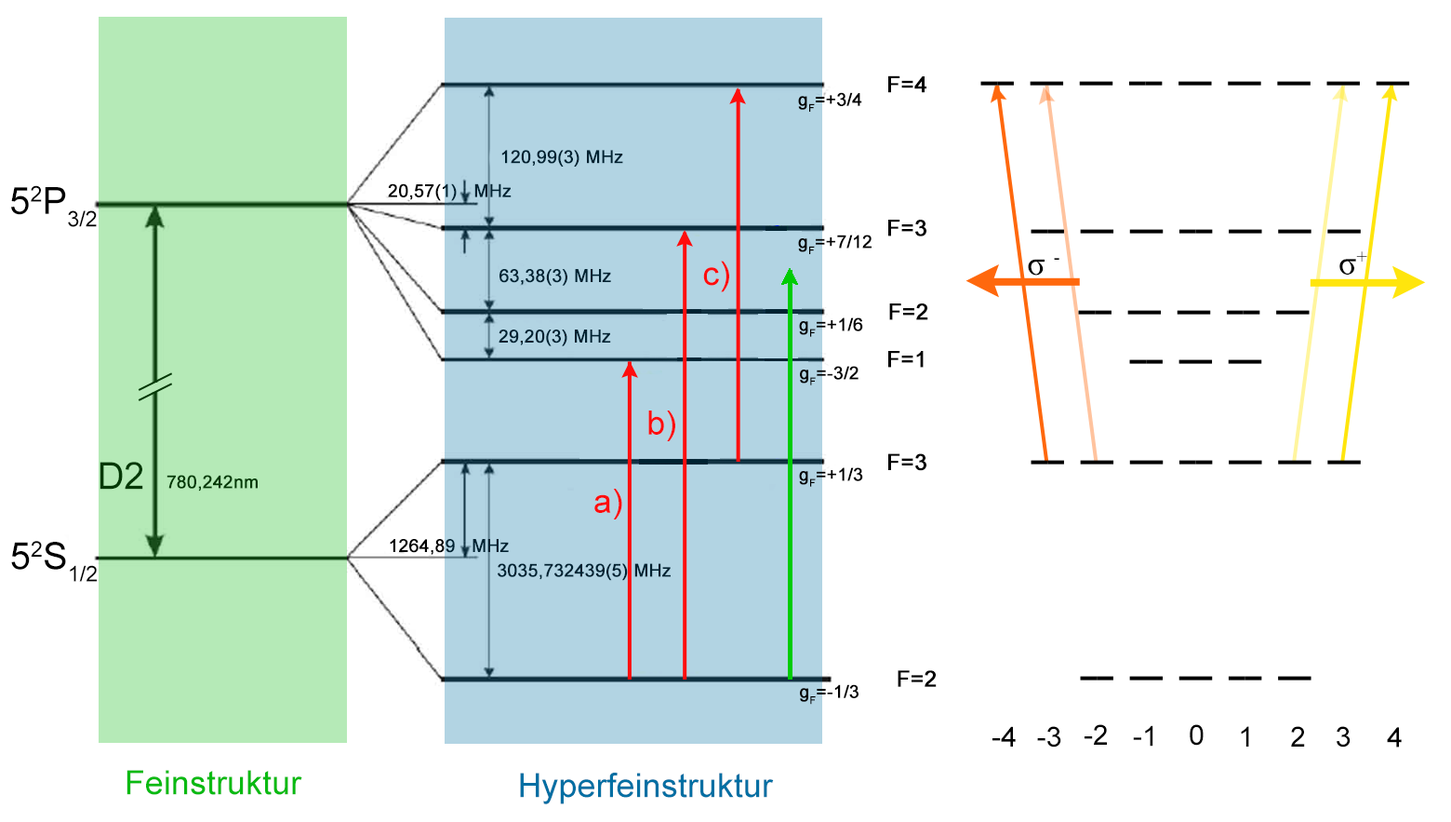
<style>
.page{position:relative;width:1451px;height:822px;background:#ffffff}
.page>*{position:absolute;margin:0}
.t1{font:22.3px "ArialMT";color:#000000;font-weight:bold}
.t2{font:17.7px "ArialMT";color:#000000;font-weight:bold}
.t3{font:17.7px "ArialMT";color:#002231;font-weight:bold}
.t4{font:37.2px "ArialMT";color:#000000}
.t5{font:17.7px "ArialMT";font-weight:bold}
.t6{font:33.5px "TimesNewRomanPSMT";color:#000000}
.t7{font:33.5px "ArialMT";color:#ff0d0d}
.t8{font:37.2px "ArialMT";color:#033805}
.t9{font:17.7px "ArialMT";color:#033805;font-weight:bold}
.t10{font:27.9px "ArialMT";color:#000000}
.t11{font:33.5px "ArialMT";color:#09ba12}
.t12{font:33.5px "ArialMT";color:#006fa3}
</style>
<div class="page">
<p class="t1" style="left:889px;top:75px;width:38px;height:18px">F=4</p>
<p class="t2" style="left:798px;top:92px;width:64px;height:20px">gF=+3/4</p>
<p class="t3" style="left:501px;top:150px;width:122px;height:17px">120,99(3) MHz</p>
<p class="t4" style="left:11px;top:185px;width:86px;height:42px">52P3/2</p>
<p class="t5" style="left:388px;top:183px;width:124px;height:18px">20,57(1)   MHz</p>
<p class="t1" style="left:889px;top:220px;width:38px;height:16px">F=3</p>
<p class="t2" style="left:798px;top:234px;width:74px;height:20px">gF=+7/12</p>
<p class="t6" style="left:1028px;top:258px;width:32px;height:17px">σ -</p>
<p class="t6" style="left:1340px;top:251px;width:28px;height:23px">σ+</p>
<p class="t3" style="left:500px;top:269px;width:111px;height:17px">63,38(3) MHz</p>
<p class="t7" style="left:703px;top:261px;width:26px;height:31px">c)</p>
<p class="t1" style="left:889px;top:303px;width:40px;height:17px">F=2</p>
<p class="t2" style="left:799px;top:317px;width:64px;height:20px">gF=+1/6</p>
<p class="t3" style="left:499px;top:329px;width:112px;height:17px">29,20(3) MHz</p>
<p class="t1" style="left:889px;top:351px;width:35px;height:17px">F=1</p>
<p class="t2" style="left:800px;top:366px;width:59px;height:19px">gF=-3/2</p>
<p class="t7" style="left:648px;top:410px;width:27px;height:31px">b)</p>
<p class="t8" style="left:100px;top:461px;width:43px;height:28px">D2</p>
<p class="t1" style="left:889px;top:453px;width:38px;height:18px">F=3</p>
<p class="t2" style="left:799px;top:467px;width:64px;height:20px">gF=+1/3</p>
<p class="t9" style="left:167px;top:475px;width:91px;height:16px">780,242nm</p>
<p class="t7" style="left:595px;top:488px;width:27px;height:31px">a)</p>
<p class="t4" style="left:11px;top:541px;width:86px;height:41px">52S1/2</p>
<p class="t5" style="left:390px;top:539px;width:119px;height:16px">1264,89   MHz</p>
<p class="t3" style="left:498px;top:563px;width:173px;height:18px">3035,732439(5) MHz</p>
<p class="t1" style="left:898px;top:670px;width:39px;height:17px">F=2</p>
<p class="t2" style="left:800px;top:684px;width:59px;height:20px">gF=-1/3</p>
<p class="t10" style="left:993px;top:726px;width:23px;height:20px">-4</p>
<p class="t10" style="left:1037px;top:726px;width:25px;height:21px">-3</p>
<p class="t10" style="left:1085px;top:724px;width:22px;height:20px">-2</p>
<p class="t10" style="left:1133px;top:725px;width:21px;height:21px">-1</p>
<p class="t10" style="left:1190px;top:724px;width:14px;height:21px">0</p>
<p class="t10" style="left:1241px;top:726px;width:9px;height:20px">1</p>
<p class="t10" style="left:1291px;top:726px;width:14px;height:20px">2</p>
<p class="t10" style="left:1337px;top:726px;width:14px;height:21px">3</p>
<p class="t10" style="left:1387px;top:727px;width:15px;height:20px">4</p>
<p class="t11" style="left:127px;top:769px;width:175px;height:26px">Feinstruktur</p>
<p class="t12" style="left:520px;top:772px;width:254px;height:32px">Hyperfeinstruktur</p>
</div>
